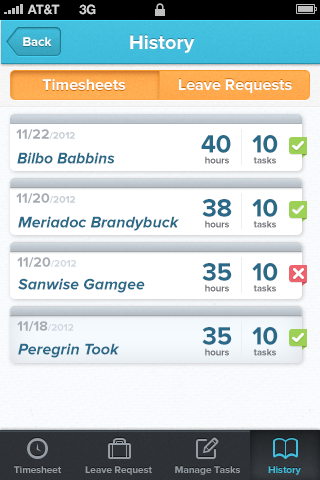
<style>
.page{position:relative;width:320px;height:480px;background:#ffffff}
.page>*{position:absolute;margin:0}
.t1{font:13px "HelveticaNeue-Bold";color:#d4d4d4;text-transform:uppercase}
.t2{font:13px "ProximaNova-Bold";color:#ffffff}
.t3{font:20px "ProximaNova-Bold";color:#ffffff}
.t4{font:16px "ProximaNova-Bold";color:#ffffff}
.t5{font:14px "ProximaNova-Bold";color:#a6acb3}
.t6{font:10px "ProximaNova-Bold";color:#c6cdd5}
.t7{font:26px "ProximaNova-Bold";color:#2a6a88;scale:0.97 1}
.t8{font:16px "ProximaNova-BoldIt";color:#2a6a88;scale:0.97 1}
.t9{font:10px "ProximaNova-Bold";color:#6f7276;scale:0.95 1}
.t10{font:16px "ProximaNova-BoldIt";color:#2a6a88}
.t11{font:10px "ProximaNova-Bold";color:#cfd7df}
.t12{font:10px "ProximaNova-Bold";color:#959ca3}
.t13{font:10px "ProximaNova-Bold";color:#41bedd}
</style>
<div class="page">
<p class="t1" style="left:27px;top:4px;width:33px;height:11px">AT&amp;t</p>
<p class="t1" style="left:79px;top:4px;width:17px;height:11px">3G</p>
<p class="t2" style="left:23px;top:37px;width:29px;height:9px">Back</p>
<p class="t3" style="left:130px;top:35px;width:65px;height:18px">History</p>
<p class="t4" style="left:42px;top:79px;width:84px;height:11px">Timesheets</p>
<p class="t4" style="left:179px;top:79px;width:113px;height:14px">Leave Requests</p>
<p class="t5" style="left:16px;top:129px;width:59px;height:11px">11/22<span class="t6">/2012</span></p>
<p class="t7" style="left:201px;top:135px;width:30px;height:18px">40</p>
<p class="t7" style="left:252px;top:135px;width:26px;height:18px">10</p>
<p class="t8" style="left:17px;top:152px;width:98px;height:12px">Bilbo Babbins</p>
<p class="t9" style="left:205px;top:156px;width:24px;height:8px">hours</p>
<p class="t9" style="left:253px;top:156px;width:23px;height:8px">tasks</p>
<p class="t5" style="left:16px;top:193px;width:59px;height:11px">11/20<span class="t6">/2012</span></p>
<p class="t7" style="left:202px;top:199px;width:30px;height:18px">38</p>
<p class="t7" style="left:252px;top:199px;width:26px;height:18px">10</p>
<p class="t10" style="left:18px;top:216px;width:161px;height:15px">Meriadoc Brandybuck</p>
<p class="t9" style="left:205px;top:220px;width:24px;height:8px">hours</p>
<p class="t9" style="left:253px;top:220px;width:23px;height:8px">tasks</p>
<p class="t5" style="left:17px;top:257px;width:59px;height:11px">11/20<span class="t11">/2012</span></p>
<p class="t7" style="left:202px;top:263px;width:30px;height:18px">35</p>
<p class="t7" style="left:252px;top:263px;width:26px;height:18px">10</p>
<p class="t10" style="left:18px;top:278px;width:127px;height:15px">Sanwise Gamgee</p>
<p class="t9" style="left:205px;top:284px;width:24px;height:8px">hours</p>
<p class="t9" style="left:253px;top:284px;width:23px;height:8px">tasks</p>
<p class="t5" style="left:17px;top:321px;width:57px;height:11px">11/18<span class="t11">/2012</span></p>
<p class="t7" style="left:202px;top:327px;width:30px;height:18px">35</p>
<p class="t7" style="left:252px;top:327px;width:26px;height:18px">10</p>
<p class="t10" style="left:18px;top:343px;width:102px;height:15px">Peregrin Took</p>
<p class="t9" style="left:205px;top:348px;width:24px;height:8px">hours</p>
<p class="t9" style="left:253px;top:348px;width:23px;height:8px">tasks</p>
<p class="t12" style="left:14px;top:466px;width:48px;height:7px">Timesheet</p>
<p class="t12" style="left:85px;top:466px;width:67px;height:9px">Leave Request</p>
<p class="t12" style="left:175px;top:466px;width:65px;height:9px">Manage Tasks</p>
<p class="t13" style="left:268px;top:466px;width:33px;height:9px">History</p>
<p class="t13" style="left:268px;top:466px;width:33px;height:9px">History</p>
</div>
